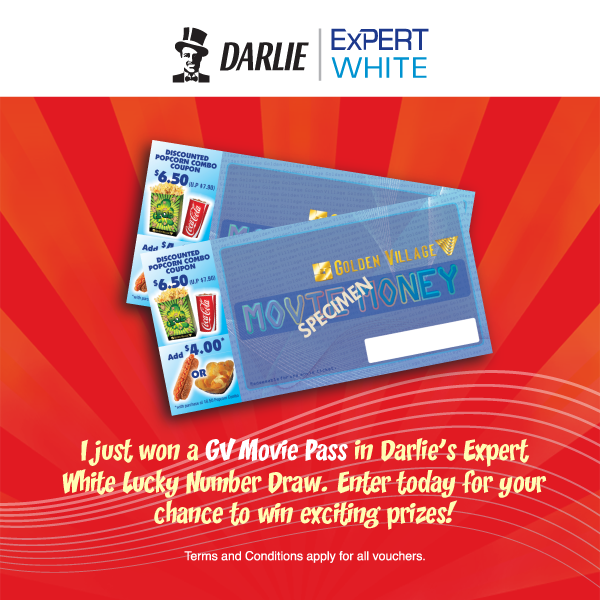
<style>
.page{position:relative;width:600px;height:600px}
.page>*{position:absolute;margin:0}
.t1{font:26px "CCZoinks";color:#fffdb3}
.t2{font:26px "CCZoinks";color:#ffffff}
</style>
<div class="page">
<p class="t1" style="left:62px;top:437px;width:485px;height:93px;text-align:center">I just won a <span class="t2">GV Movie Pass</span> in Darlie’s Expert White Lucky Number Draw. Enter today for your chance to win exciting prizes!</p>
</div>
